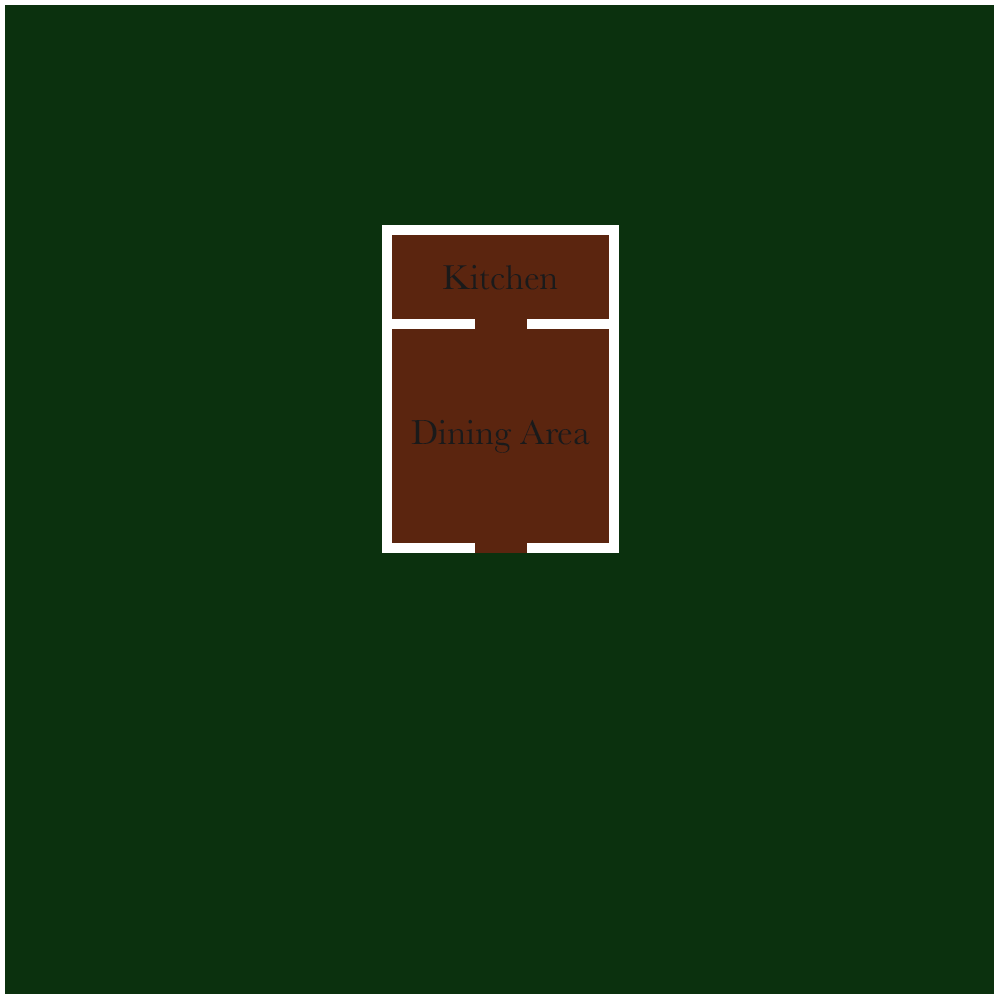
<style>
.page{position:relative;width:1000px;height:1000px;background:#0b310e}
.page>*{position:absolute;margin:0}
.t1{font:36px "Baskerville";color:#1a1a1a}
</style>
<div class="page">
<p class="t1" style="left:443px;top:264px;width:115px;height:26px">Kitchen</p>
<p class="t1" style="left:411px;top:419px;width:179px;height:34px">Dining Area</p>
</div>
